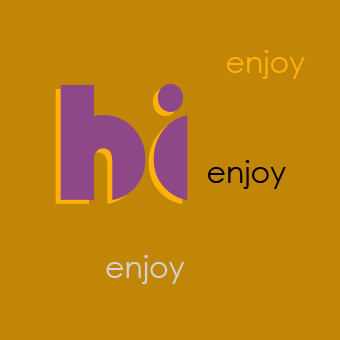
<style>
.page{position:relative;width:340px;height:340px;background:#c18607}
.page>*{position:absolute;margin:0}
.t1{font:30px "CenturyGothic";color:#ffb10a}
.t2{font:120px "Fingerpop";color:#ffb10a}
.t3{font:120px "Fingerpop";color:#8e4888}
.t4{font:30px "CenturyGothic";color:#080012}
.t5{font:30px "CenturyGothic";color:#d3d3d5}
</style>
<div class="page">
<p class="t1" style="left:226px;top:50px;width:79px;height:29px">enjoy</p>
<p class="t2" style="left:55px;top:88px;width:128px;height:116px">hi</p>
<p class="t3" style="left:60px;top:84px;width:128px;height:116px">hi</p>
<p class="t4" style="left:207px;top:160px;width:79px;height:29px">enjoy</p>
<p class="t5" style="left:106px;top:255px;width:79px;height:29px">enjoy</p>
</div>
